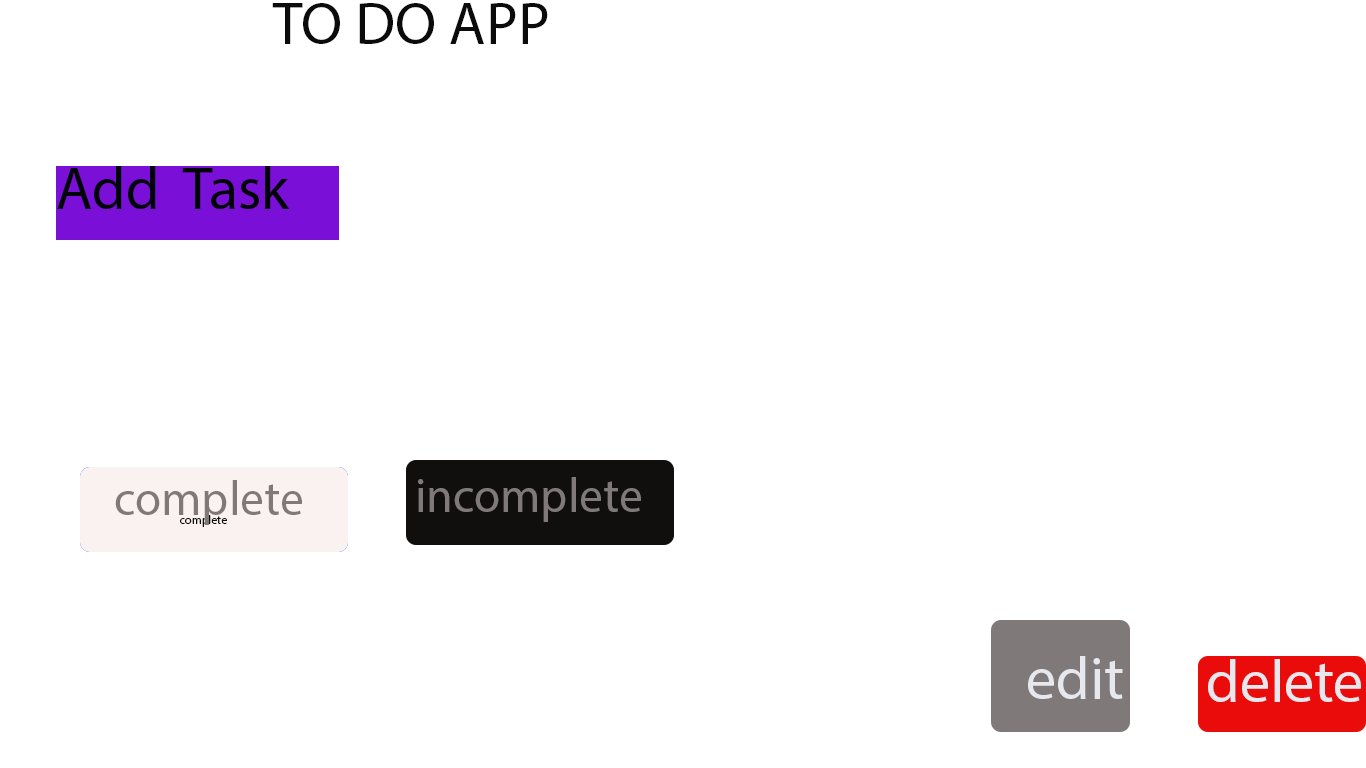
<style>
.page{position:relative;width:1366px;height:768px;background:#ffffff}
.page>*{position:absolute;margin:0}
.t1{font:60px "MyriadPro-Regular";color:#0a0b0a}
.t2{font:60px "MyriadPro-Regular";color:#010309}
.t3{font:48px "MyriadPro-Regular";color:#7f7979}
.t4{font:12px "MyriadPro-Regular";color:#110e0e}
.t5{font:60px "MyriadPro-Regular";color:#e6e8ee}
</style>
<div class="page">
<p class="t1" style="left:272px;top:3px;width:276px;height:41px">TO DO APP</p>
<p class="t2" style="left:57px;top:166px;width:233px;height:43px">Add  Task</p>
<p class="t3" style="left:115px;top:480px;width:187px;height:45px">complete</p>
<p class="t3" style="left:418px;top:477px;width:223px;height:45px">incomplete</p>
<p class="t4" style="left:180px;top:515px;width:47px;height:12px">complete</p>
<p class="t5" style="left:1028px;top:656px;width:95px;height:43px">edit</p>
<p class="t5" style="left:1208px;top:659px;width:153px;height:43px">delete</p>
</div>
